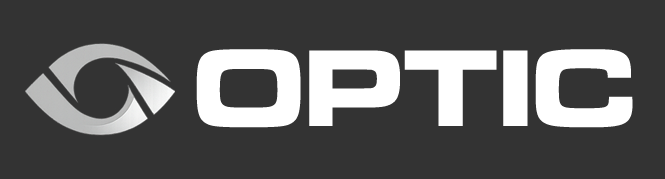
<style>
.page{position:relative;width:665px;height:179px;background:#333333}
.page>*{position:absolute;margin:0}
.t1{font:113.3px "MicrogrammaExtD-Bol";color:#ffffff}
</style>
<div class="page">
<p class="t1" style="left:196px;top:49px;width:437px;height:79px">OPTIC</p>
</div>
